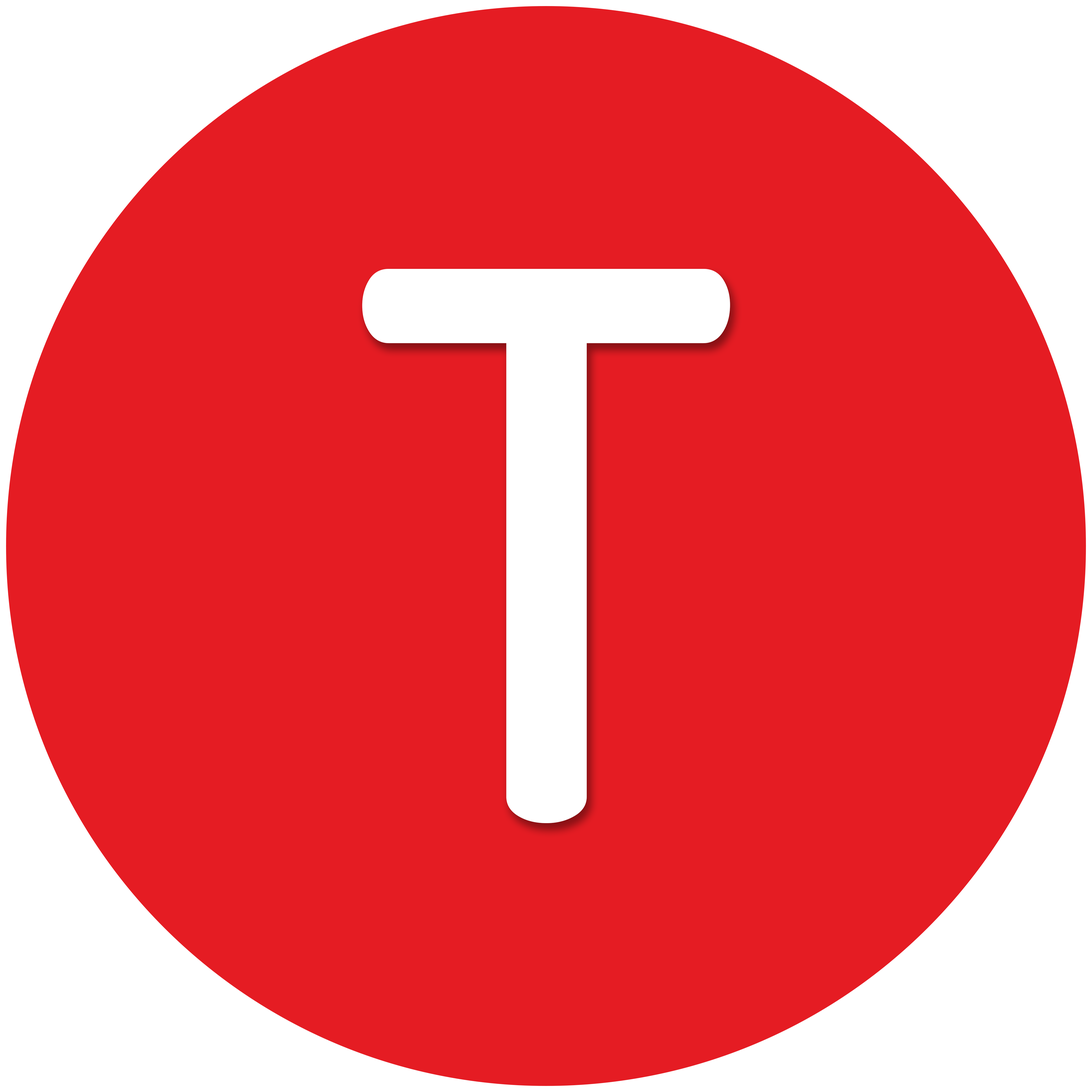
<style>
.page{position:relative;width:1092px;height:1092px;background:#e51c23}
.page>*{position:absolute;margin:0}
.t1{font:758.3px "Dosis-SemiBold";color:#ffffff}
</style>
<div class="page">
<p class="t1" style="left:362px;top:269px;width:368px;height:554px">T</p>
</div>
